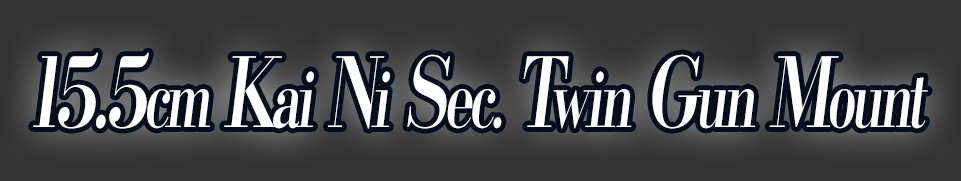
<style>
.page{position:relative;width:961px;height:181px;background:#333333}
.page>*{position:absolute;margin:0}
.t1{font:96px "KochoStd-Heavy";letter-spacing:-0.08em;color:#ffffff;font-style:italic;scale:0.69 1}
.t2{font:76.8px "KochoStd-Heavy";letter-spacing:-0.08em;color:#ffffff;font-style:italic;scale:0.69 1}
</style>
<div class="page">
<p class="t1" style="left:33px;top:52px;width:895px;height:77px">15.5<span class="t2">cm</span> K<span class="t2">ai</span> N<span class="t2">i</span> S<span class="t2">ec.</span> T<span class="t2">win</span> G<span class="t2">un</span> M<span class="t2">ount</span></p>
</div>
